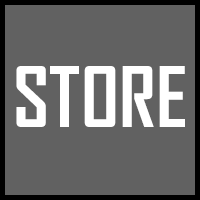
<style>
.page{position:relative;width:200px;height:200px;background:#616161}
.page>*{position:absolute;margin:0}
.t1{font:79.9px "AgencyFB-Bold";color:#ffffff}
</style>
<div class="page">
<p class="t1" style="left:16px;top:66px;width:169px;height:61px">STORE</p>
</div>
